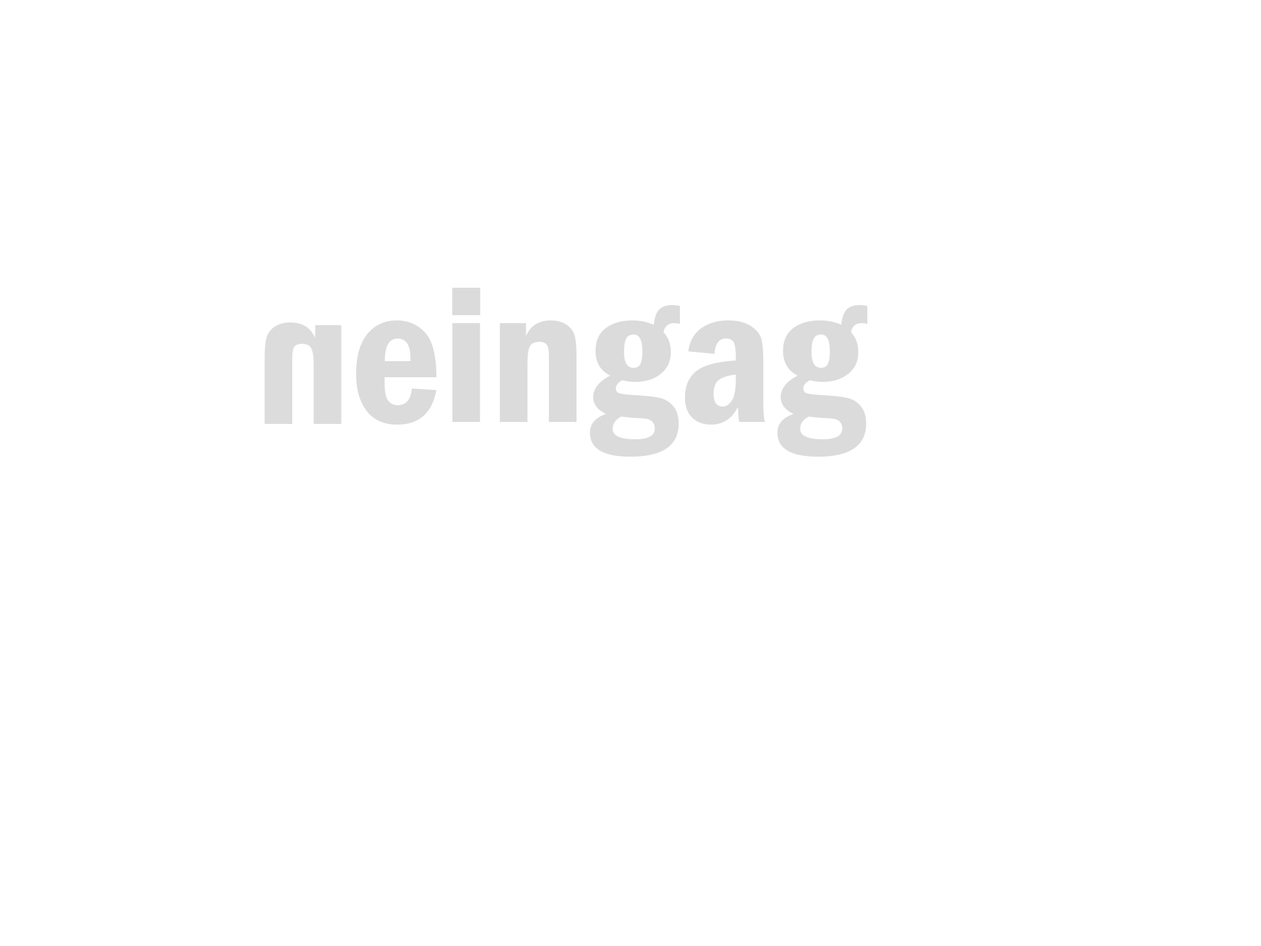
<style>
.page{position:relative;width:1261px;height:946px;background:#ffffff}
.page>*{position:absolute;margin:0}
.t1{font:200.2px "FranklinGothic-DemiCond";color:#dbdbdb}
.t2{font:200.2px "FranklinGothic-DemiCond";color:#dcdcdc}
</style>
<div class="page">
<p class="t1" style="left:356px;top:288px;width:511px;height:168px">eingag</p>
<p class="t2" style="left:264px;top:322px;width:78px;height:102px;rotate:180deg">n</p>
</div>
